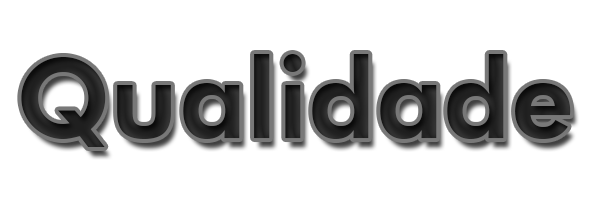
<style>
.page{position:relative;width:600px;height:200px;background:#ffffff}
.page>*{position:absolute;margin:0}
.t1{font:110px "FuturaBT-Heavy";color:#212121}
</style>
<div class="page">
<p class="t1" style="left:21px;top:54px;width:550px;height:93px">Qualidade</p>
</div>
